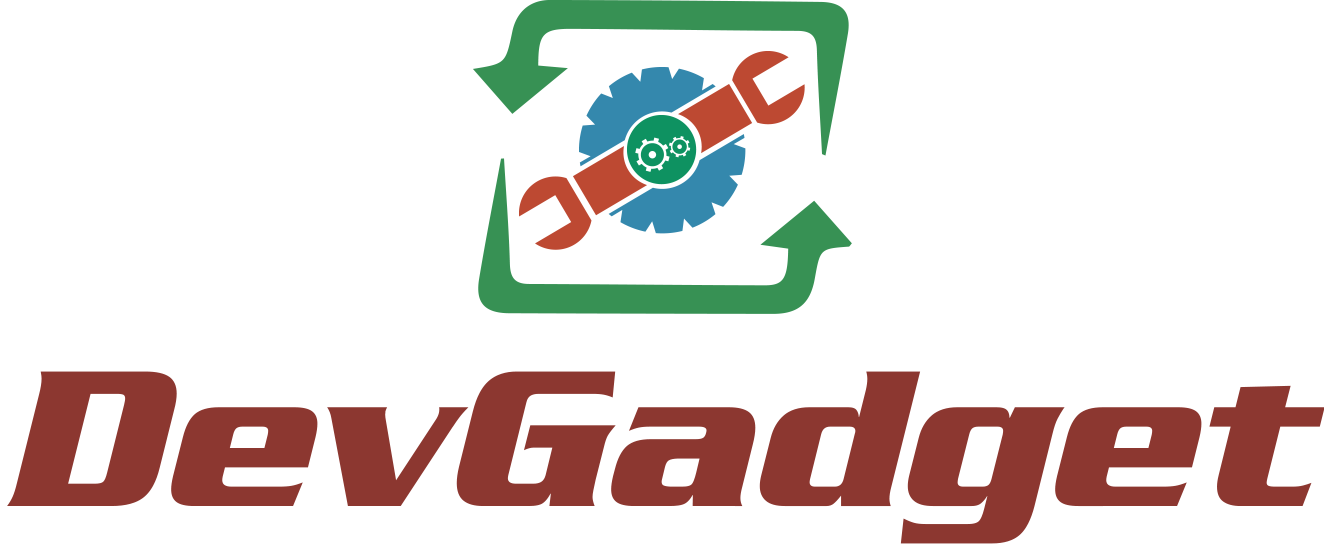
<style>
.page{position:relative;width:1324px;height:555px;background:#ffffff}
.page>*{position:absolute;margin:0}
.t1{font:210px "Serpentine-BoldOblique";color:#8c3730}
</style>
<div class="page">
<p class="t1" style="left:7px;top:371px;width:1318px;height:173px">DevGadget</p>
</div>
